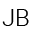
<style>
.page{position:relative;width:32px;height:32px;background:#ffffff}
.page>*{position:absolute;margin:0}
.t1{font:24px "Roboto-Light";color:#000000}
</style>
<div class="page">
<p class="t1" style="left:2px;top:9px;width:27px;height:17px">JB</p>
</div>
